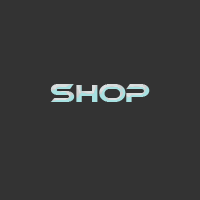
<style>
.page{position:relative;width:200px;height:200px;background:#333333}
.page>*{position:absolute;margin:0}
.t1{font:24px "Ethnocentric"}
</style>
<div class="page">
<p class="t1" style="left:50px;top:84px;width:100px;height:18px">Shop</p>
</div>
